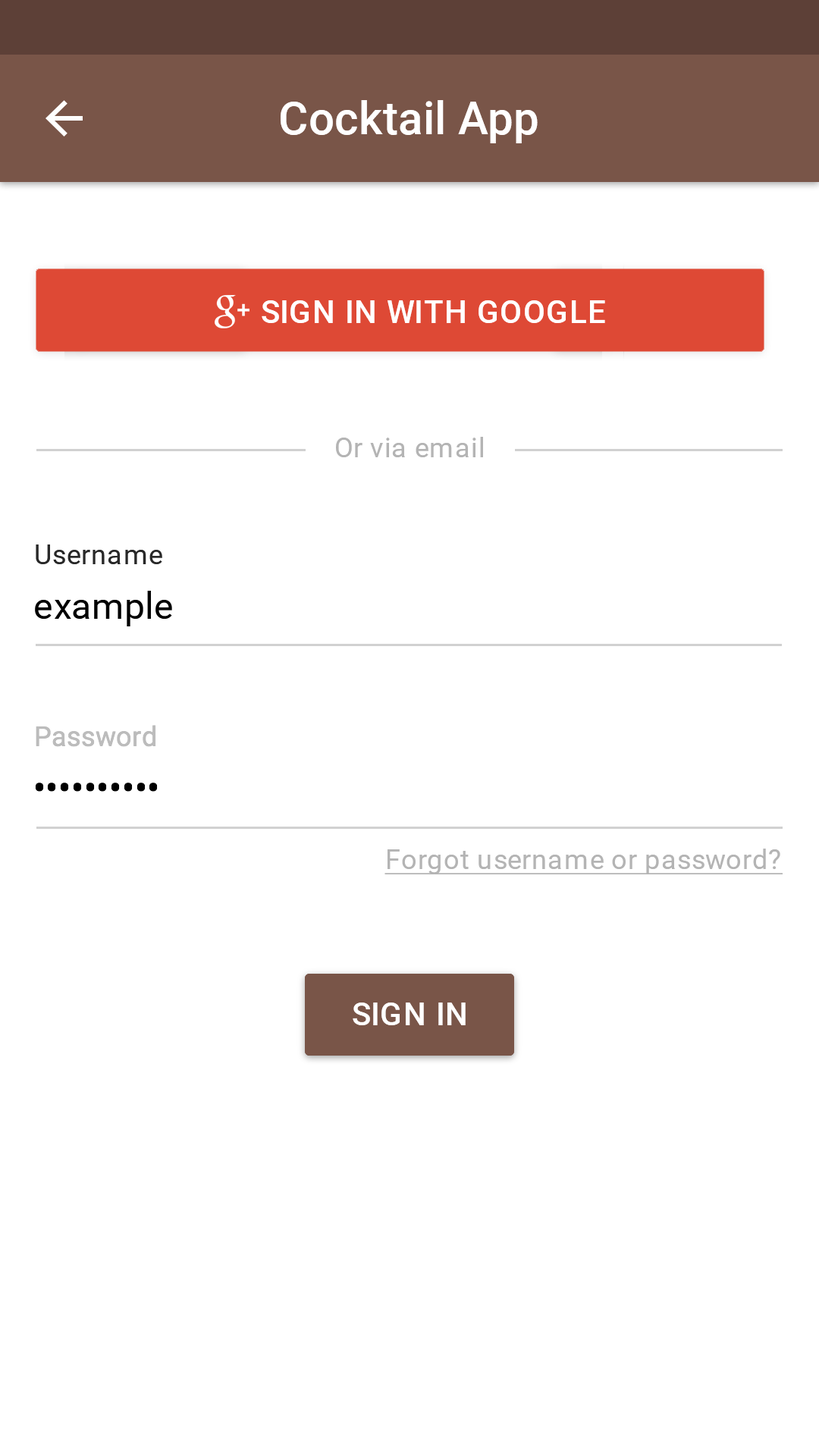
<style>
.page{position:relative;width:819px;height:1456px;background:#ffffff}
.page>*{position:absolute;margin:0}
.t1{font:45.5px "Roboto-Medium";letter-spacing:0.005em;color:#ffffff}
.t2{font:31.8px "Roboto-Medium";letter-spacing:0.01em;color:#ffffff;text-transform:uppercase}
.t3{font:27.3px "Roboto-Regular";letter-spacing:0.02em;color:#b4b4b4}
.t4{font:27.3px "Roboto-Regular";letter-spacing:0.02em;color:#282828}
.t5{font:36.4px "Roboto-Regular";letter-spacing:0.01em;color:#000000}
.t6{font:27.3px "Roboto-Regular";letter-spacing:0.02em;color:#bcbcbc}
.t7{font:27.3px "Roboto-Regular";letter-spacing:0.02em;color:#b4b4b4;text-decoration:underline}
</style>
<div class="page">
<p class="t1" style="left:281px;top:100px;width:257px;height:43px">Cocktail App</p>
<p class="t2" style="left:262px;top:300px;width:343px;height:23px">Sign in with google</p>
<p class="t3" style="left:336px;top:437px;width:147px;height:20px">Or via email</p>
<p class="t4" style="left:36px;top:544px;width:126px;height:20px">Username</p>
<p class="t5" style="left:35px;top:591px;width:137px;height:35px">example</p>
<p class="t6" style="left:36px;top:725px;width:120px;height:22px">Password</p>
<p class="t5" style="left:35px;top:783px;width:123px;height:9px">••••••••••</p>
<p class="t7" style="left:384px;top:849px;width:399px;height:25px">Forgot username or password?</p>
<p class="t2" style="left:353px;top:1003px;width:113px;height:22px">Sign in</p>
</div>
